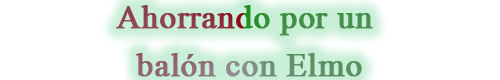
<style>
.page{position:relative;width:500px;height:80px;background:#ffffff}
.page>*{position:absolute;margin:0}
.t1{font:49px/48px "Microsoft-Himalaya";font-weight:bold}
</style>
<div class="page">
<p class="t1" style="left:116px;top:5px;width:257px;height:72px;text-align:center">Ahorrando por un <br>balón con Elmo</p>
</div>
